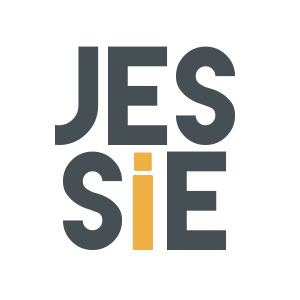
<style>
.page{position:relative;width:300px;height:300px;background:#ffffff}
.page>*{position:absolute;margin:0}
.t1{font:125px/104.2px "LemonMilk";color:#464f53}
.t2{font:125px/104.2px "PoplarStd";color:#efb146}
</style>
<div class="page">
<p class="t1" style="left:55px;top:46px;width:181px;height:204px;text-align:center">jes<br>s<span class="t2">i </span>e</p>
</div>
